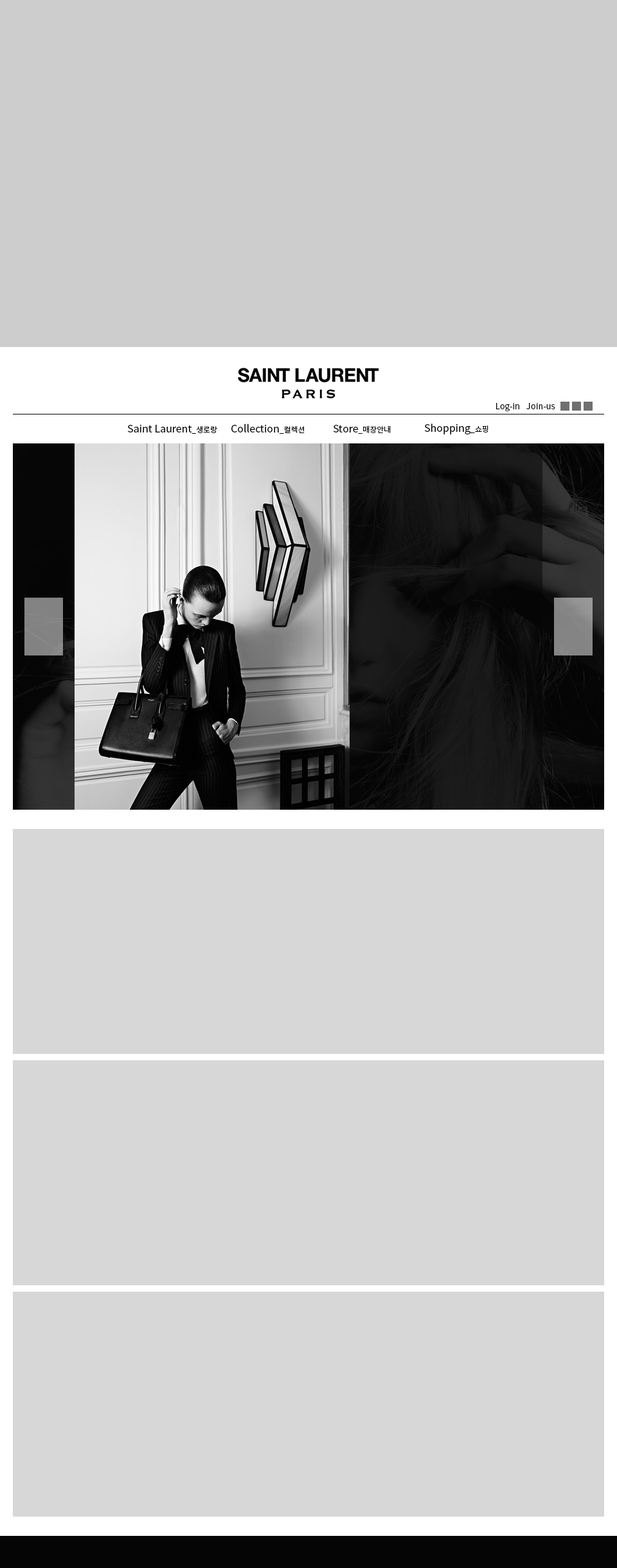
<style>
.page{position:relative;width:617px;height:1568px;background:#d7d7d7}
.page>*{position:absolute;margin:0}
.t1{font:8.4px "NotoSansCJKkr-Regular";color:#050505}
.t2{font:10.3px "NotoSansCJKkr-Regular";color:#050505}
.t3{font:7.7px "NotoSansCJKkr-Regular";color:#050505}
</style>
<div class="page">
<p class="t1" style="left:496px;top:403px;width:23px;height:8px">Log-in</p>
<p class="t1" style="left:526px;top:403px;width:29px;height:6px">Join-us</p>
<p class="t2" style="left:127px;top:424px;width:90px;height:10px">Saint Laurent<span class="t3">_생로랑</span></p>
<p class="t2" style="left:231px;top:423px;width:74px;height:11px">Collection<span class="t3">_컬렉션</span></p>
<p class="t2" style="left:333px;top:425px;width:58px;height:9px">Store<span class="t3">_매장안내</span></p>
<p class="t2" style="left:424px;top:423px;width:64px;height:11px">Shopping<span class="t3">_쇼핑</span></p>
</div>
